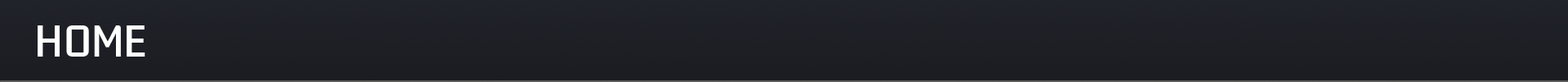
<style>
.page{position:relative;width:1568px;height:82px}
.page>*{position:absolute;margin:0}
.t1{font:39.2px "KdamThmorPro-Regular";color:#ffffff}
</style>
<div class="page">
<p class="t1" style="left:38px;top:25px;width:107px;height:31px">HOME</p>
</div>
